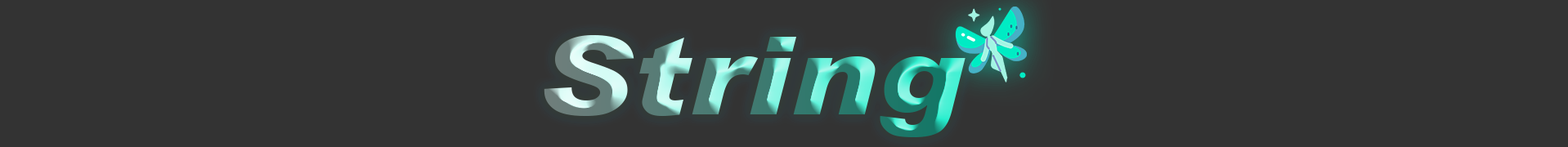
<style>
.page{position:relative;width:1568px;height:147px;background:#333333}
.page>*{position:absolute;margin:0}
.t1{font:108.8px "Arial-BlackItalic";scale:1.2 1}
</style>
<div class="page">
<p class="t1" style="left:544px;top:35px;width:421px;height:102px">String</p>
</div>
